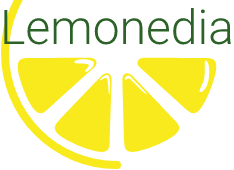
<style>
.page{position:relative;width:234px;height:170px;background:#ffffff}
.page>*{position:absolute;margin:0}
.t1{font:48px "Roboto-Light";color:#2c6128}
</style>
<div class="page">
<p class="t1" style="left:4px;top:8px;width:227px;height:37px">Lemonedia</p>
</div>
